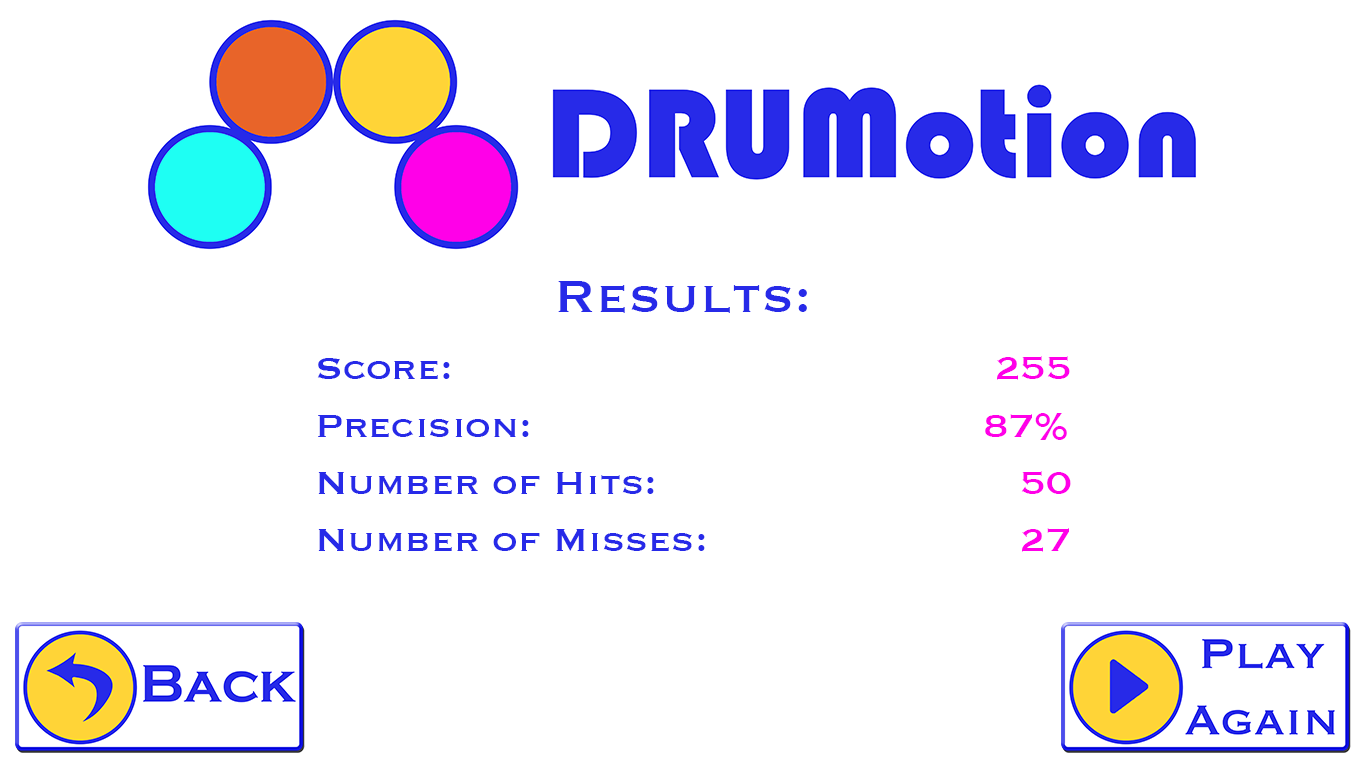
<style>
.page{position:relative;width:1366px;height:768px;background:#ffffff}
.page>*{position:absolute;margin:0}
.t1{font:58.3px "Copperplate";color:#272ae8}
.t2{font:41.7px "Copperplate";color:#272ae8}
.t3{font:41.7px "Copperplate";color:#ff00e8}
</style>
<div class="page">
<p class="t1" style="left:558px;top:281px;width:249px;height:32px">Results:</p>
<p class="t2" style="left:317px;top:358px;width:388px;height:193px">Score: <br>Precision: <br>Number of Hits: <br>Number of Misses:</p>
<p class="t3" style="left:985px;top:356px;width:86px;height:196px;text-align:right">255<br>87%<br>50<br>27</p>
</div>
